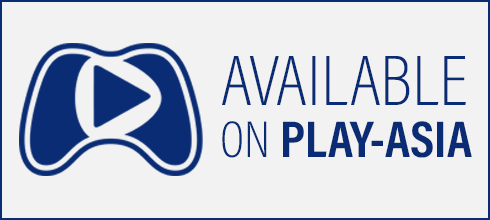
<style>
.page{position:relative;width:490px;height:220px;background:#f2f2f2}
.page>*{position:absolute;margin:0}
.t1{font:72px "AcuminConcept-CondensedExtraLight";color:#092c74}
.t2{font:52px "AcuminConcept-CondensedBold";color:#092c74}
.t3{font:52px "AcuminConcept-CondensedExtraLight";color:#092c74}
</style>
<div class="page">
<p class="t1" style="left:222px;top:56px;width:244px;height:49px">AVAILABLE</p>
<p class="t2" style="left:222px;top:121px;width:250px;height:37px"><span class="t3">ON </span>PLAY-ASIA</p>
</div>
